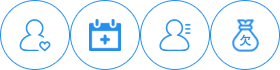
<style>
.page{position:relative;width:280px;height:70px;background:#ffffff}
.page>*{position:absolute;margin:0}
.t1{font:12px "HeitiCSEG-Medium-T-GB";letter-spacing:0.1em;color:#258ff1}
</style>
<div class="page">
<p class="t1" style="left:239px;top:34px;width:12px;height:12px">欠</p>
</div>
